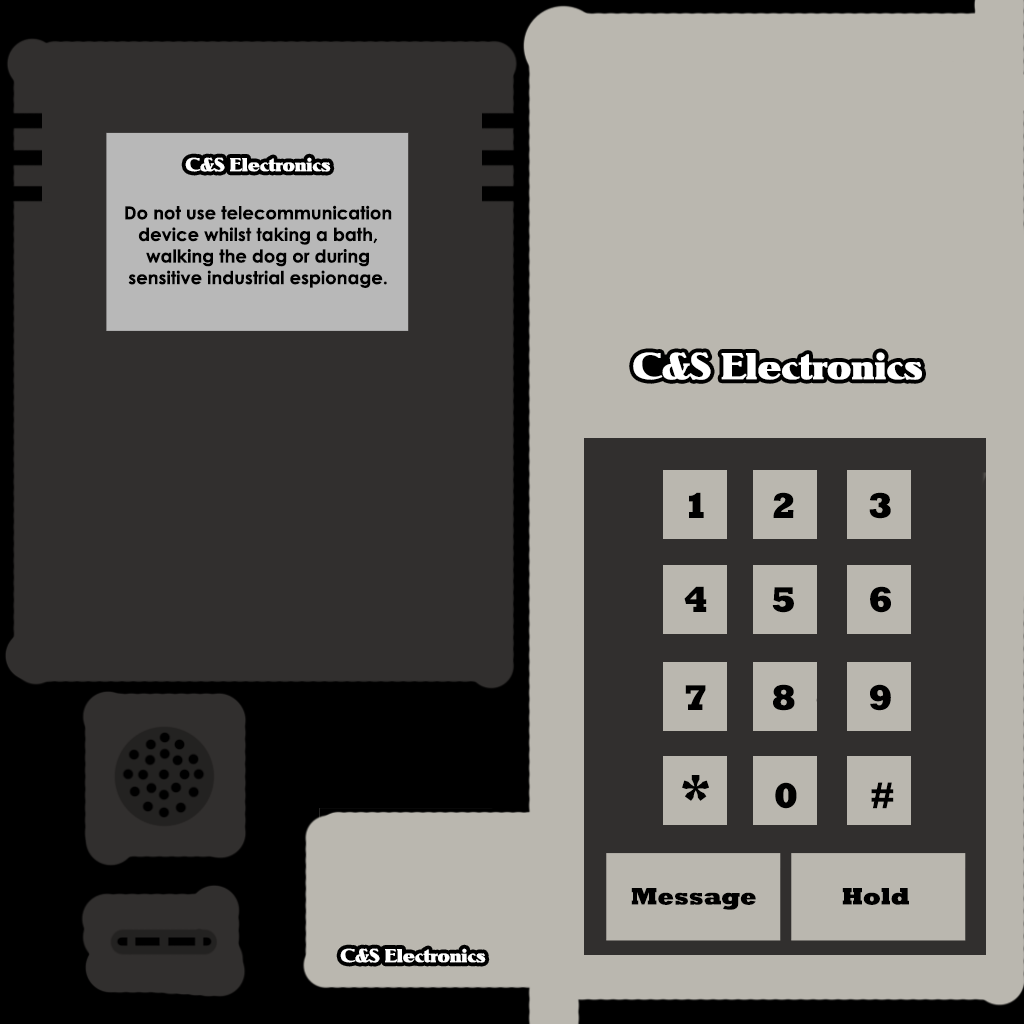
<style>
.page{position:relative;width:1024px;height:1024px;background:#312f2e}
.page>*{position:absolute;margin:0}
.t1{font:18px "Notram";color:#ffffff}
.t2{font:18px "CenturyGothic-Bold";color:#000000}
.t3{font:36px "Notram";color:#ffffff}
.t4{font:36px "Rockwell-ExtraBold";color:#000000}
.t5{font:48px "Rockwell-ExtraBold";color:#000000}
.t6{font:24px "Rockwell-ExtraBold";color:#000000}
</style>
<div class="page">
<p class="t1" style="left:185px;top:157px;width:146px;height:15px">C&amp;S Electronics</p>
<p class="t2" style="left:125px;top:205px;width:267px;height:83px;text-align:center">Do not use telecommunication<br>device whilst taking a bath,<br>walking the dog or during<br>sensitive industrial espionage.</p>
<p class="t3" style="left:633px;top:352px;width:289px;height:28px">C&amp;S Electronics</p>
<p class="t4" style="left:689px;top:492px;width:202px;height:27px">1       2        3</p>
<p class="t4" style="left:684px;top:586px;width:207px;height:27px">4       5        6</p>
<p class="t4" style="left:685px;top:684px;width:206px;height:27px">7       8        9</p>
<p class="t4" style="left:682px;top:775px;width:212px;height:34px"><span class="t5">*</span>       0        #</p>
<p class="t6" style="left:631px;top:888px;width:125px;height:22px">Message</p>
<p class="t6" style="left:842px;top:888px;width:67px;height:17px">Hold</p>
<p class="t1" style="left:340px;top:948px;width:146px;height:15px">C&amp;S Electronics</p>
</div>
